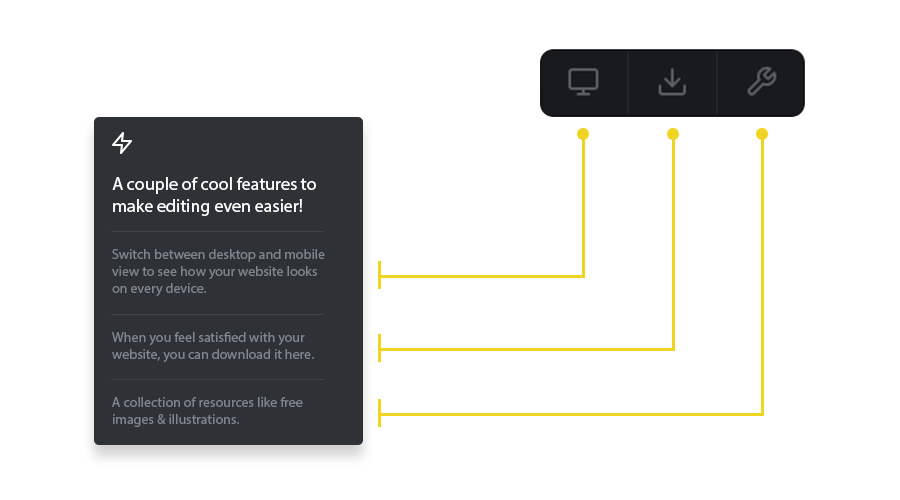
<style>
.page{position:relative;width:900px;height:500px;background:#ffffff}
.page>*{position:absolute;margin:0}
.t1{font:18px "MyriadPro-Regular";color:#fffefe}
.t2{font:14px "MyriadPro-Regular";color:#7d858e}
</style>
<div class="page">
<p class="t1" style="left:112px;top:177px;width:204px;height:39px">A couple of cool features to<br>make editing even easier!</p>
<p class="t2" style="left:112px;top:249px;width:213px;height:47px">Switch between desktop and mobile<br>view to see how your website looks <br>on every device.</p>
<p class="t2" style="left:112px;top:332px;width:202px;height:31px">When you feel satisfied with your <br>website, you can download it here.</p>
<p class="t2" style="left:112px;top:397px;width:191px;height:30px">A collection of resources like free <br>images &amp; illustrations.</p>
</div>
